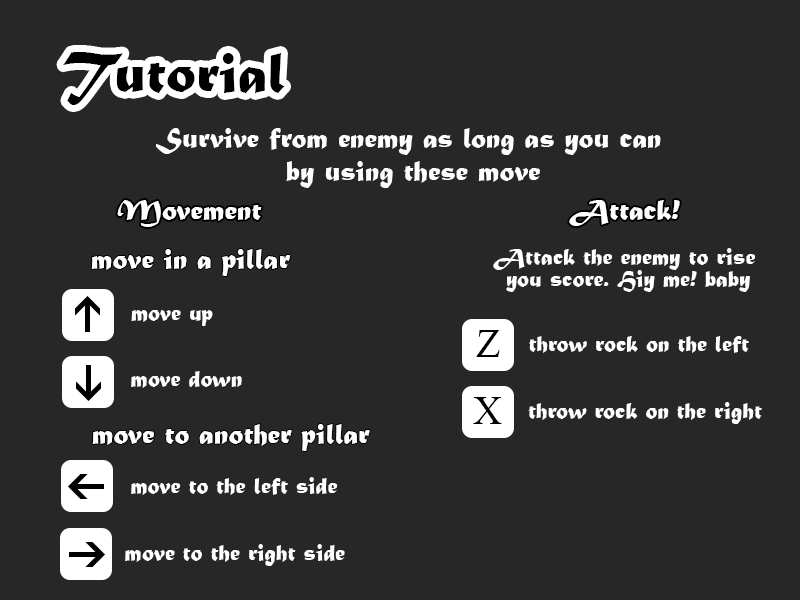
<style>
.page{position:relative;width:800px;height:600px;background:#272727}
.page>*{position:absolute;margin:0}
.t1{font:60px "MaturaMTScriptCapitals";color:#000000}
.t2{font:30px/11px "MaturaMTScriptCapitals";color:#ffffff}
.t3{font:30px "MaturaMTScriptCapitals";color:#ffffff}
.t4{font:24px/11px "MaturaMTScriptCapitals";color:#ffffff}
.t5{font:24px "MaturaMTScriptCapitals";color:#ffffff}
.t6{font:60px "Microsoft-Himalaya";color:#000000}
.t7{font:24px "Microsoft-Himalaya";color:#000000}
</style>
<div class="page">
<p class="t1" style="left:63px;top:52px;width:222px;height:53px">Tutorial</p>
<p class="t2" style="left:155px;top:128px;width:506px;height:60px;text-align:center">Survive from enemy as long as you can<br><br><br> by using these move</p>
<p class="t3" style="left:117px;top:200px;width:145px;height:27px">Movement</p>
<p class="t3" style="left:569px;top:200px;width:111px;height:26px">Attack!</p>
<p class="t3" style="left:91px;top:249px;width:200px;height:27px">move in a pillar</p>
<p class="t4" style="left:493px;top:248px;width:263px;height:44px;text-align:center">Attack the enemy to rise<br><br> you score. Hiy me! baby</p>
<p class="t5" style="left:131px;top:310px;width:82px;height:16px">move up</p>
<p class="t6" style="left:476px;top:330px;width:24px;height:27px"><span class="t7"><br></span><br>Z</p>
<p class="t5" style="left:529px;top:336px;width:220px;height:17px">throw rock on the left</p>
<p class="t5" style="left:131px;top:371px;width:111px;height:17px">move down</p>
<p class="t6" style="left:473px;top:397px;width:29px;height:27px"><span class="t7"><br></span><br>X</p>
<p class="t5" style="left:528px;top:402px;width:234px;height:22px">throw rock on the right</p>
<p class="t3" style="left:92px;top:424px;width:278px;height:27px">move to another pillar</p>
<p class="t5" style="left:131px;top:477px;width:207px;height:18px">move to the left side</p>
<p class="t5" style="left:125px;top:544px;width:220px;height:22px">move to the right side</p>
</div>
